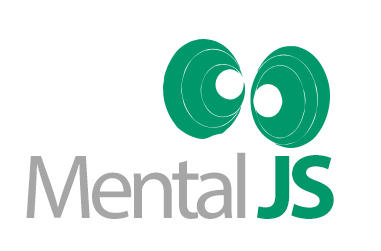
<style>
.page{position:relative;width:381px;height:251px;background:#ffffff}
.page>*{position:absolute;margin:0}
.t1{font:92px "MyriadPro-Regular";letter-spacing:-0.08em;color:#a6a6a6}
.t2{font:92px "MyriadPro-Bold";letter-spacing:-0.08em;color:#00976b}
</style>
<div class="page">
<p class="t1" style="left:26px;top:152px;width:308px;height:67px">Mental <span class="t2">JS</span></p>
</div>
